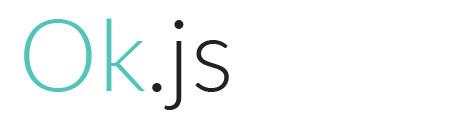
<style>
.page{position:relative;width:450px;height:128px;background:#ffffff}
.page>*{position:absolute;margin:0}
.t1{font:100px "Lato-Light";color:#222222}
.t2{font:100px "Lato-Light";color:#53c4b8}
</style>
<div class="page">
<p class="t1" style="left:24px;top:18px;width:205px;height:92px"><span class="t2">Ok</span>.js</p>
</div>
